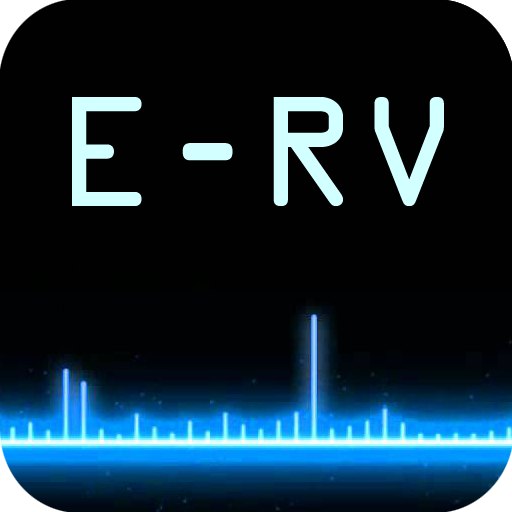
<style>
.page{position:relative;width:512px;height:512px;background:#010101}
.page>*{position:absolute;margin:0}
.t1{font:140px "OCRAStd";color:#d2ffff}
</style>
<div class="page">
<p class="t1" style="left:72px;top:97px;width:372px;height:109px">E-RV</p>
</div>
